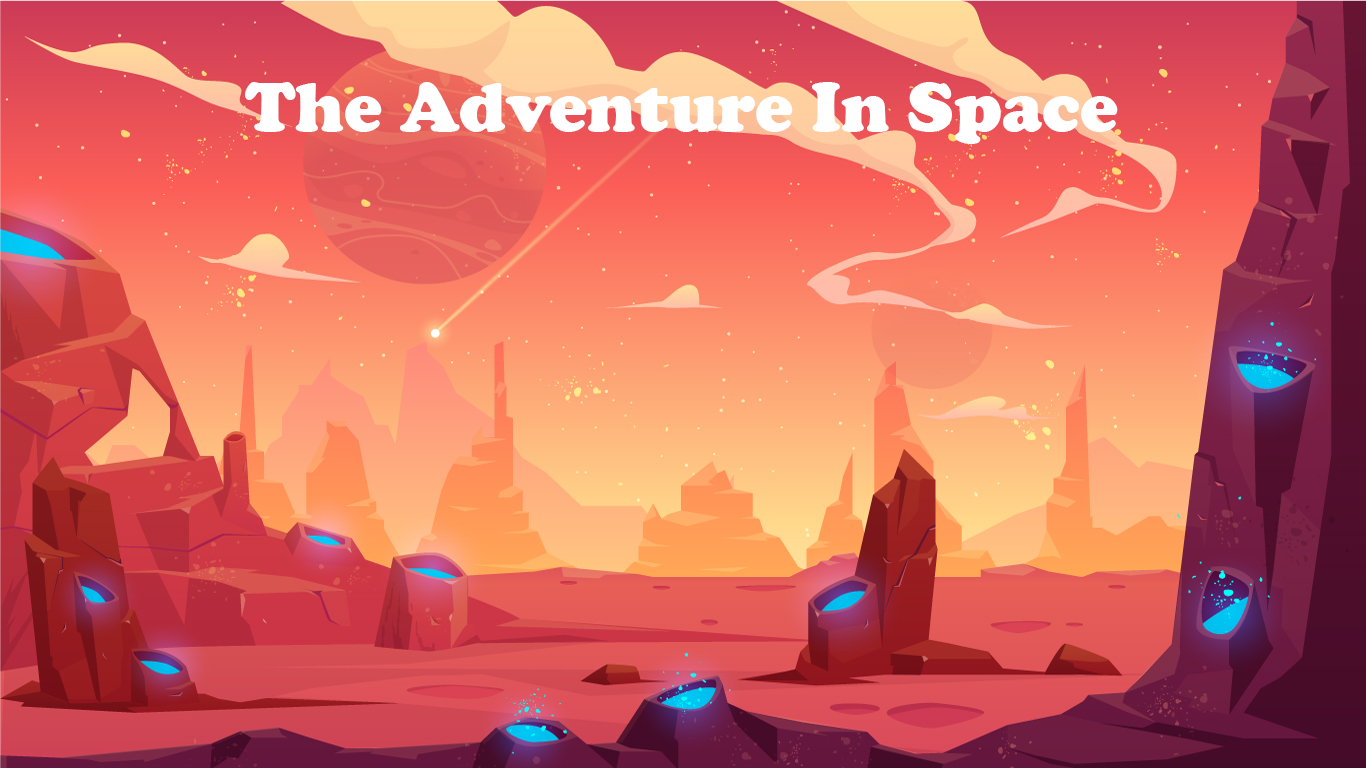
<style>
.page{position:relative;width:1366px;height:768px}
.page>*{position:absolute;margin:0}
.t1{font:72px "CooperBlack";color:#ffffff}
</style>
<div class="page">
<p class="t1" style="left:245px;top:82px;width:873px;height:62px">The Adventure In Space</p>
</div>
